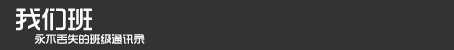
<style>
.page{position:relative;width:454px;height:50px;background:#333333}
.page>*{position:absolute;margin:0}
.t1{font:26px "TRENDS";color:#fcfcfc}
.t2{font:11px "TRENDS";color:#fafafa}
</style>
<div class="page">
<p class="t1" style="left:16px;top:8px;width:76px;height:23px">我们班</p>
<p class="t2" style="left:35px;top:34px;width:110px;height:10px">永不丢失的班级通讯录</p>
</div>
